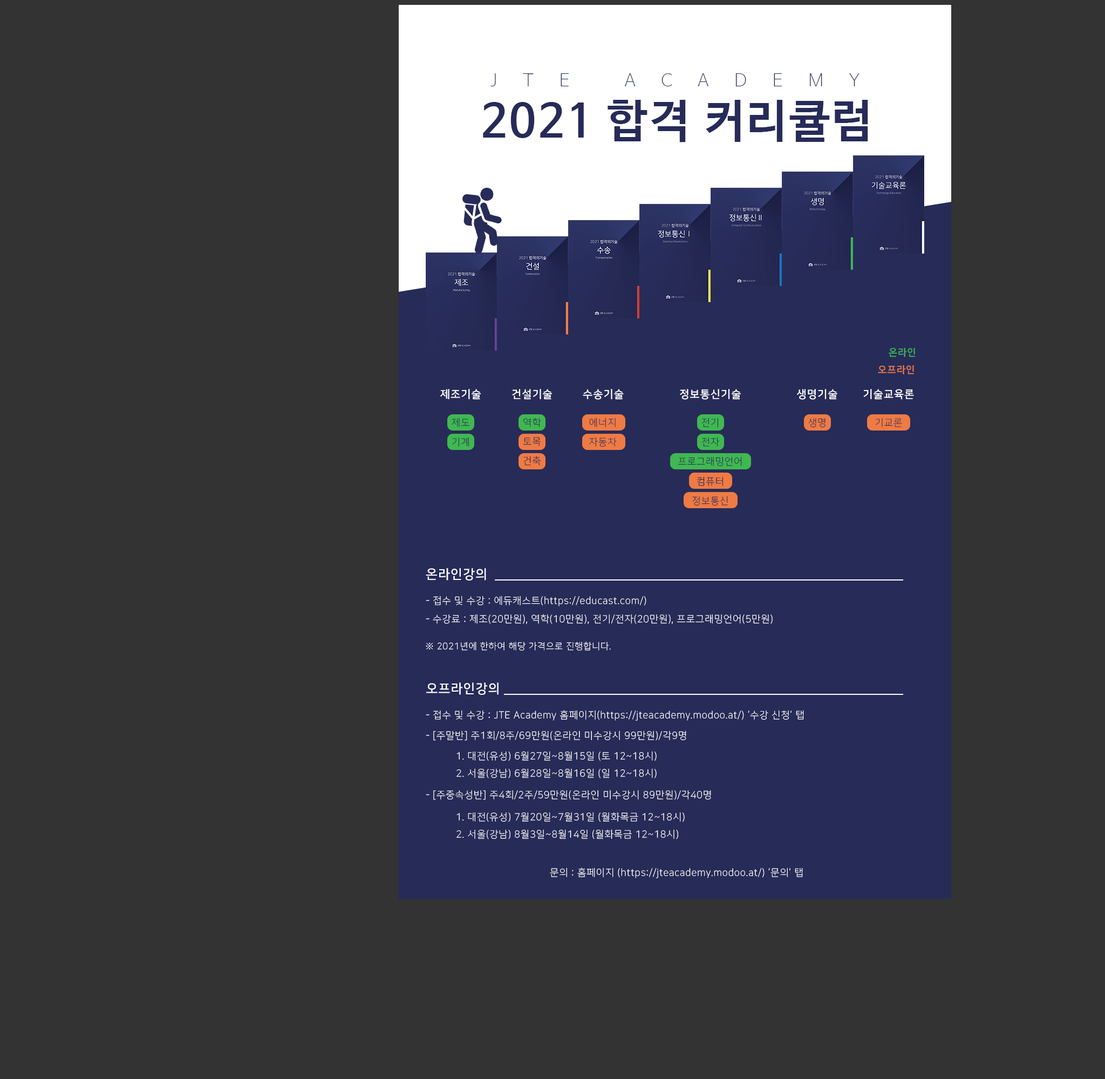
<style>
.page{position:relative;width:1105px;height:1079px;background:#333333}
.page>*{position:absolute;margin:0}
.t1{font:17.1px "NanumBarunGothicUltraLight";letter-spacing:1.5em;color:#272b58}
.t2{font:45.1px "NanumBarunGothicBold";letter-spacing:0.05em;color:#272b58}
.t3{font:9.7px "NanumSquareB";letter-spacing:0.05em;color:#40b952}
.t4{font:9.7px "NanumSquareB";letter-spacing:0.05em;color:#f17c44}
.t5{font:10.8px "NanumSquareB";letter-spacing:0.05em;color:#ffffff}
.t6{font:9.7px "NanumSquareL";letter-spacing:0.05em;color:#272b58}
.t7{font:12.9px "NanumSquareB";letter-spacing:0.05em;color:#ffffff}
.t8{font:9.7px "NanumSquareL";letter-spacing:0.05em;color:#ffffff}
.t9{font:9px "NanumSquareL";letter-spacing:0.05em;color:#ffffff}
</style>
<div class="page">
<p class="t1" style="left:490px;top:73px;width:370px;height:13px">JTE ACADEMY</p>
<p class="t2" style="left:483px;top:100px;width:385px;height:42px">2021 합격 커리큘럼</p>
<p class="t3" style="left:889px;top:347px;width:27px;height:10px">온라인</p>
<p class="t4" style="left:878px;top:365px;width:36px;height:9px">오프라인</p>
<p class="t5" style="left:440px;top:389px;width:41px;height:11px">제조기술</p>
<p class="t5" style="left:512px;top:389px;width:41px;height:11px">건설기술</p>
<p class="t5" style="left:583px;top:389px;width:41px;height:11px">수송기술</p>
<p class="t5" style="left:680px;top:389px;width:61px;height:11px">정보통신기술</p>
<p class="t5" style="left:797px;top:389px;width:40px;height:11px">생명기술</p>
<p class="t5" style="left:863px;top:389px;width:51px;height:11px">기술교육론</p>
<p class="t6" style="left:452px;top:418px;width:18px;height:9px">제도</p>
<p class="t6" style="left:523px;top:418px;width:18px;height:9px">역학</p>
<p class="t6" style="left:589px;top:418px;width:27px;height:9px">에너지</p>
<p class="t6" style="left:701px;top:418px;width:17px;height:9px">전기</p>
<p class="t6" style="left:808px;top:418px;width:18px;height:9px">생명</p>
<p class="t6" style="left:876px;top:418px;width:26px;height:9px">기교론</p>
<p class="t6" style="left:452px;top:437px;width:17px;height:10px">기계</p>
<p class="t6" style="left:523px;top:437px;width:18px;height:9px">토목</p>
<p class="t6" style="left:589px;top:437px;width:28px;height:10px">자동차</p>
<p class="t6" style="left:701px;top:437px;width:19px;height:10px">전자</p>
<p class="t6" style="left:523px;top:456px;width:18px;height:10px">건축</p>
<p class="t6" style="left:678px;top:456px;width:64px;height:10px">프로그래밍언어</p>
<p class="t6" style="left:697px;top:476px;width:26px;height:10px">컴퓨터</p>
<p class="t6" style="left:692px;top:496px;width:36px;height:10px">정보통신</p>
<p class="t7" style="left:426px;top:568px;width:60px;height:13px">온라인강의</p>
<p class="t8" style="left:426px;top:596px;width:220px;height:10px">- 접수 및 수강 : 에듀캐스트(https://educast.com/)</p>
<p class="t8" style="left:426px;top:614px;width:347px;height:10px">- 수강료 : 제조(20만원), 역학(10만원), 전기/전자(20만원), 프로그래밍언어(5만원)</p>
<p class="t9" style="left:426px;top:642px;width:185px;height:9px">※ 2021년에 한하여 해당 가격으로 진행합니다.</p>
<p class="t7" style="left:426px;top:683px;width:73px;height:12px">오프라인강의</p>
<p class="t8" style="left:426px;top:710px;width:378px;height:11px">- 접수 및 수강 : JTE Academy 홈페이지(https://jteacademy.modoo.at/) ‘수강 신청’ 탭</p>
<p class="t8" style="left:426px;top:731px;width:260px;height:10px">- [주말반] 주1회/8주/69만원(온라인 미수강시 99만원)/각9명恨</p>
<p class="t8" style="left:456px;top:751px;width:201px;height:28px">1. 대전(유성) 6월27일~8월15일 (토 12~18시)<br>2. 서울(강남) 6월28일~8월16일 (일 12~18시)</p>
<p class="t8" style="left:426px;top:790px;width:285px;height:10px">- [주중속성반] 주4회/2주/59만원(온라인 미수강시 89만원)/각40명恨</p>
<p class="t8" style="left:456px;top:812px;width:229px;height:28px">1. 대전(유성) 7월20일~7월31일 (월화목금 12~18시)<br>2. 서울(강남) 8월3일~8월14일 (월화목금 12~18시)</p>
<p class="t8" style="left:550px;top:868px;width:253px;height:10px">문의 : 홈페이지 (https://jteacademy.modoo.at/) ‘문의’ 탭</p>
</div>
